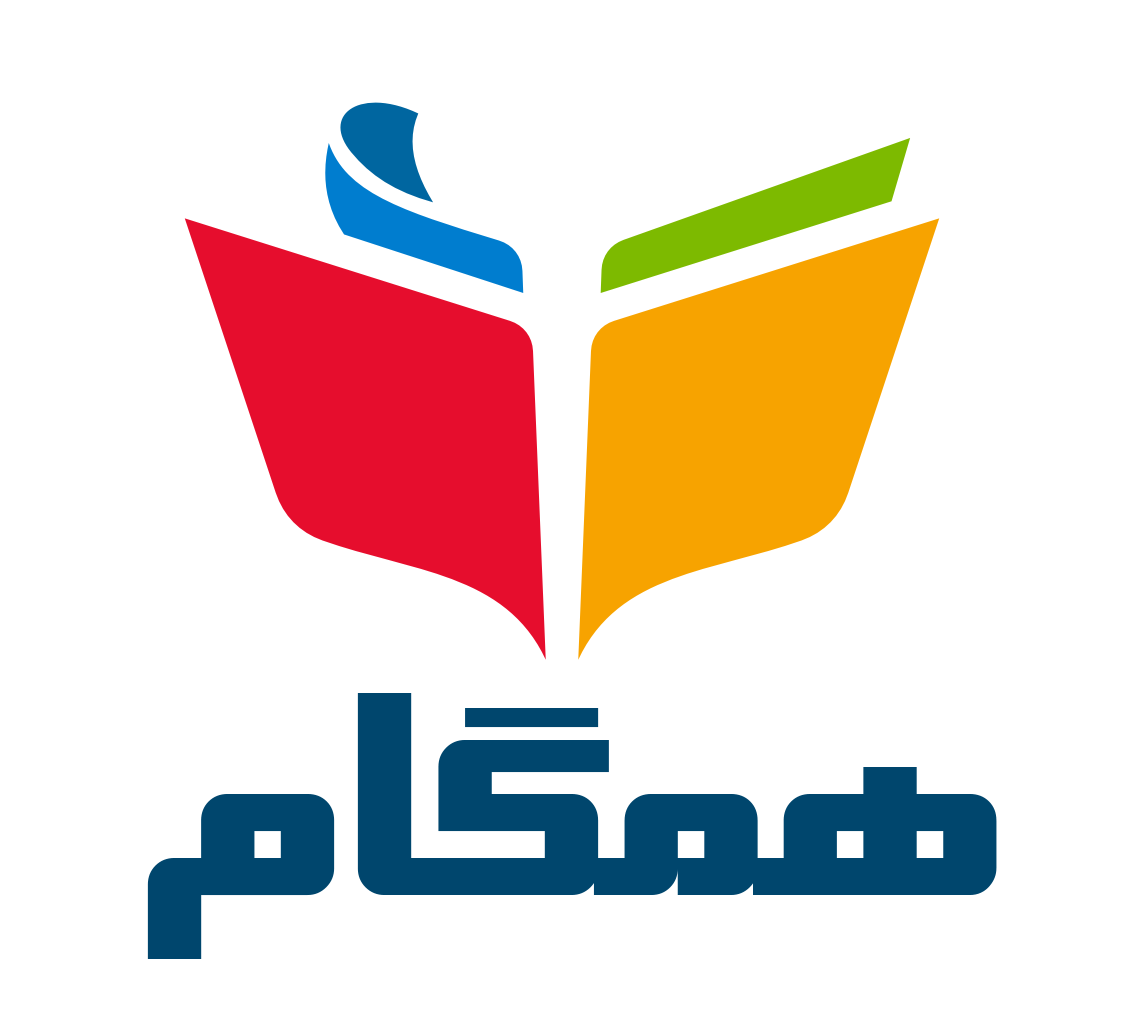
<style>
.page{position:relative;width:1122px;height:1010px;background:#ffffff}
.page>*{position:absolute;margin:0}
.t1{font:266.7px "BSinaBold";color:#00466d}
</style>
<div class="page">
<p class="t1" style="left:147px;top:693px;width:850px;height:266px">همگام</p>
</div>
